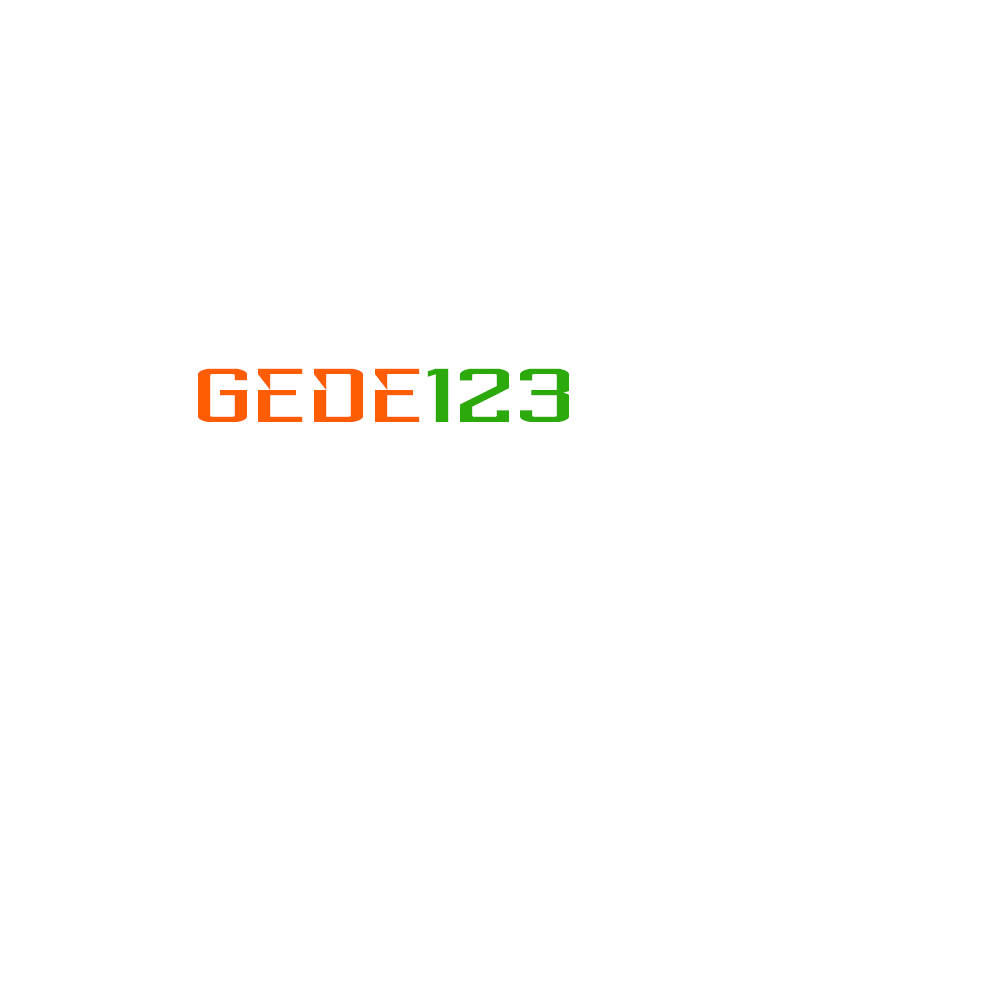
<style>
.page{position:relative;width:1000px;height:1000px;background:#ffffff}
.page>*{position:absolute;margin:0}
.t1{font:76px "Reckoner";color:#ff5d04;scale:2.31 1}
.t2{font:76px "Reckoner";color:#2dab0b;scale:2.31 1}
</style>
<div class="page">
<p class="t1" style="left:197px;top:368px;width:223px;height:54px">gede</p>
<p class="t2" style="left:427px;top:368px;width:142px;height:54px">123</p>
</div>
